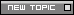
<style>
.page{position:relative;width:74px;height:15px;background:#7f7f7f}
.page>*{position:absolute;margin:0}
.t1{font:8px "BitDustTwo";color:#ffffff}
</style>
<div class="page">
<p class="t1" style="left:8px;top:5px;width:47px;height:5px">NEW TOPIC</p>
</div>
